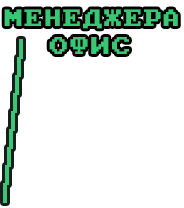
<style>
.page{position:relative;width:184px;height:208px;background:#ffffff}
.page>*{position:absolute;margin:0}
.t1{font:18.8px "PxPlus_IBM_BIOS";letter-spacing:0.075em;color:#39c773}
.t2{font:19.6px "PxPlus_IBM_BIOS";letter-spacing:0.075em;color:#39c773}
</style>
<div class="page">
<p class="t1" style="left:4px;top:9px;width:174px;height:20px">МЕНЕДЖЕРА</p>
<p class="t2" style="left:49px;top:37px;width:80px;height:17px">ОФИС</p>
</div>
